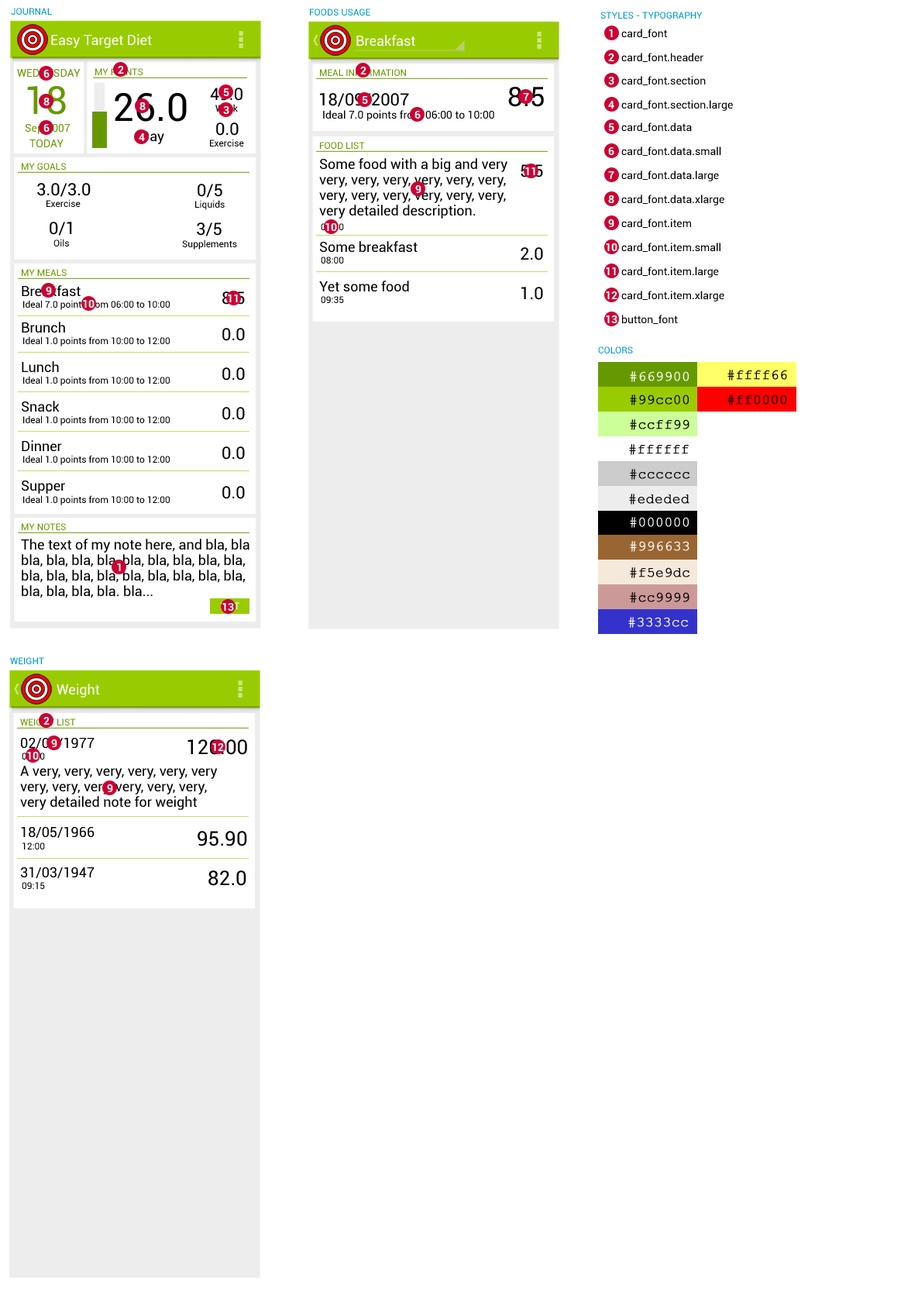
<style>
.page{position:relative;width:918px;height:1299px;background:#ffffff}
.page>*{position:absolute;margin:0}
.t1{font:9.3px "Roboto-Regular";color:#0099cc}
.t2{font:10.8px "Roboto-Bold";color:#ffffff}
.t3{font:10.8px "Roboto-Regular";color:#000000}
.t4{font:13.9px "Roboto-Regular";color:#ffffff}
.t5{font:10.8px "Roboto-Regular";color:#669900}
.t6{font:9.3px "Roboto-Regular";color:#669900}
.t7{font:38.7px "Roboto-Regular";color:#669900}
.t8{font:17px "Roboto-Regular";color:#000000}
.t9{font:27.1px "Roboto-Regular";color:#000000}
.t10{font:38.7px "Roboto-Regular";color:#000000}
.t11{font:9.3px "Roboto-Regular"}
.t12{font:13.9px "Roboto-Regular"}
.t13{font:9.3px "Roboto-Regular";color:#000000}
.t14{font:13.9px/15.5px "Roboto-Regular";color:#000000}
.t15{font:13.9px "Roboto-Regular";color:#000000}
.t16{font:17px "Roboto-Regular"}
.t17{font:13.9px "CourierNewPSMT";color:#fffefe;font-weight:bold}
.t18{font:13.9px "CourierNewPSMT";color:#000000;font-weight:bold}
.t19{font:13.9px "CourierNewPSMT";color:#ffffff;font-weight:bold}
.t20{font:20.1px "Roboto-Regular";color:#000000}
</style>
<div class="page">
<p class="t1" style="left:11px;top:8px;width:41px;height:7px">JOURNAL</p>
<p class="t1" style="left:310px;top:9px;width:60px;height:6px">FOODS USAGE</p>
<p class="t1" style="left:601px;top:12px;width:102px;height:7px">STYLES - TYPOGRAPHY</p>
<p class="t2" style="left:609px;top:29px;width:4px;height:8px">1</p>
<p class="t3" style="left:621px;top:29px;width:46px;height:9px">card_font</p>
<p class="t4" style="left:51px;top:34px;width:101px;height:14px">Easy Target Diet</p>
<p class="t4" style="left:356px;top:35px;width:59px;height:11px">Breakfast</p>
<p class="t2" style="left:608px;top:53px;width:6px;height:8px">2</p>
<p class="t3" style="left:621px;top:53px;width:83px;height:9px">card_font.header</p>
<p class="t2" style="left:118px;top:66px;width:6px;height:8px">2</p>
<p class="t5" style="left:17px;top:69px;width:64px;height:8px">WEDNESDAY</p>
<p class="t2" style="left:43px;top:70px;width:7px;height:7px">6</p>
<p class="t6" style="left:95px;top:68px;width:48px;height:7px">MY POINTS</p>
<p class="t6" style="left:320px;top:69px;width:86px;height:7px">MEAL INFORMATION</p>
<p class="t2" style="left:360px;top:67px;width:7px;height:7px">2</p>
<p class="t2" style="left:608px;top:77px;width:6px;height:7px">3</p>
<p class="t3" style="left:621px;top:76px;width:85px;height:9px">card_font.section</p>
<p class="t7" style="left:27px;top:86px;width:39px;height:29px">18</p>
<p class="t8" style="left:210px;top:88px;width:33px;height:13px">49.0</p>
<p class="t2" style="left:223px;top:88px;width:6px;height:8px">5</p>
<p class="t9" style="left:508px;top:87px;width:36px;height:20px">8.5</p>
<p class="t2" style="left:43px;top:98px;width:7px;height:7px">8</p>
<p class="t10" style="left:115px;top:93px;width:72px;height:29px">26.0</p>
<p class="t8" style="left:320px;top:93px;width:89px;height:14px">18/09/2007</p>
<p class="t2" style="left:362px;top:96px;width:6px;height:8px">5</p>
<p class="t2" style="left:523px;top:93px;width:6px;height:8px">7</p>
<p class="t2" style="left:608px;top:101px;width:6px;height:7px">4</p>
<p class="t3" style="left:621px;top:100px;width:112px;height:11px">card_font.section.large</p>
<p class="t2" style="left:139px;top:102px;width:7px;height:8px">8</p>
<p class="t11" style="left:215px;top:104px;width:23px;height:8px">Week</p>
<p class="t2" style="left:223px;top:106px;width:6px;height:8px">3</p>
<p class="t3" style="left:323px;top:110px;width:171px;height:11px">Ideal 7.0 points from 06:00 to 10:00</p>
<p class="t2" style="left:415px;top:111px;width:6px;height:8px">6</p>
<p class="t5" style="left:25px;top:124px;width:46px;height:10px">Sep 2007</p>
<p class="t2" style="left:43px;top:124px;width:7px;height:8px">6</p>
<p class="t8" style="left:216px;top:122px;width:23px;height:14px">0.0</p>
<p class="t2" style="left:608px;top:123px;width:6px;height:8px">5</p>
<p class="t3" style="left:621px;top:122px;width:71px;height:10px">card_font.data</p>
<p class="t2" style="left:139px;top:133px;width:6px;height:8px">4</p>
<p class="t12" style="left:141px;top:131px;width:23px;height:13px">Day</p>
<p class="t5" style="left:29px;top:139px;width:35px;height:8px">TODAY</p>
<p class="t13" style="left:210px;top:139px;width:34px;height:7px">Exercise</p>
<p class="t6" style="left:320px;top:142px;width:45px;height:7px">FOOD LIST</p>
<p class="t2" style="left:608px;top:147px;width:6px;height:8px">6</p>
<p class="t3" style="left:621px;top:146px;width:100px;height:10px">card_font.data.small</p>
<p class="t14" style="left:319px;top:158px;width:189px;height:61px">Some food with a big and very<br>very, very, very, very, very, very,<br>very, very, very, very, very, very,<br>very detailed description.</p>
<p class="t6" style="left:22px;top:163px;width:44px;height:7px">MY GOALS</p>
<p class="t8" style="left:521px;top:164px;width:22px;height:13px">5.5</p>
<p class="t2" style="left:525px;top:167px;width:10px;height:8px">11</p>
<p class="t2" style="left:608px;top:171px;width:6px;height:8px">7</p>
<p class="t3" style="left:621px;top:170px;width:98px;height:11px">card_font.data.large</p>
<p class="t8" style="left:37px;top:183px;width:54px;height:14px">3.0/3.0</p>
<p class="t8" style="left:198px;top:184px;width:24px;height:14px">0/5</p>
<p class="t2" style="left:415px;top:185px;width:7px;height:8px">9</p>
<p class="t2" style="left:608px;top:195px;width:6px;height:8px">8</p>
<p class="t3" style="left:621px;top:194px;width:103px;height:11px">card_font.data.xlarge</p>
<p class="t13" style="left:46px;top:199px;width:35px;height:8px">Exercise</p>
<p class="t13" style="left:195px;top:200px;width:30px;height:10px">Liquids</p>
<p class="t8" style="left:50px;top:222px;width:22px;height:14px">0/1</p>
<p class="t2" style="left:608px;top:219px;width:6px;height:8px">9</p>
<p class="t3" style="left:621px;top:219px;width:70px;height:9px">card_font.item</p>
<p class="t8" style="left:197px;top:222px;width:25px;height:14px">3/5</p>
<p class="t11" style="left:321px;top:223px;width:23px;height:7px">07:00</p>
<p class="t2" style="left:325px;top:223px;width:12px;height:8px">10</p>
<p class="t13" style="left:53px;top:239px;width:16px;height:7px">Oils</p>
<p class="t13" style="left:182px;top:239px;width:55px;height:11px">Supplements</p>
<p class="t15" style="left:320px;top:241px;width:98px;height:12px">Some breakfast</p>
<p class="t2" style="left:606px;top:243px;width:12px;height:8px">10</p>
<p class="t3" style="left:621px;top:243px;width:100px;height:9px">card_font.item.small</p>
<p class="t13" style="left:321px;top:256px;width:23px;height:7px">08:00</p>
<p class="t8" style="left:521px;top:247px;width:22px;height:13px">2.0</p>
<p class="t6" style="left:22px;top:269px;width:45px;height:7px">MY MEALS</p>
<p class="t2" style="left:606px;top:267px;width:10px;height:8px">11</p>
<p class="t3" style="left:621px;top:267px;width:98px;height:10px">card_font.item.large</p>
<p class="t15" style="left:319px;top:280px;width:90px;height:11px">Yet some food</p>
<p class="t15" style="left:22px;top:285px;width:59px;height:12px">Breakfast</p>
<p class="t2" style="left:46px;top:287px;width:6px;height:7px">9</p>
<p class="t16" style="left:222px;top:291px;width:23px;height:14px">8.5</p>
<p class="t8" style="left:521px;top:287px;width:22px;height:13px">1.0</p>
<p class="t2" style="left:606px;top:291px;width:12px;height:8px">12</p>
<p class="t3" style="left:621px;top:291px;width:103px;height:10px">card_font.item.xlarge</p>
<p class="t13" style="left:23px;top:300px;width:147px;height:10px">Ideal 7.0 points from 06:00 to 10:00</p>
<p class="t2" style="left:83px;top:300px;width:12px;height:8px">10</p>
<p class="t2" style="left:228px;top:294px;width:10px;height:8px">11</p>
<p class="t13" style="left:321px;top:296px;width:23px;height:7px">09:35</p>
<p class="t2" style="left:606px;top:315px;width:12px;height:8px">13</p>
<p class="t3" style="left:622px;top:315px;width:56px;height:9px">button_font</p>
<p class="t15" style="left:22px;top:322px;width:43px;height:11px">Brunch</p>
<p class="t8" style="left:222px;top:328px;width:23px;height:13px">0.0</p>
<p class="t13" style="left:23px;top:336px;width:147px;height:10px">Ideal 1.0 points from 10:00 to 12:00</p>
<p class="t1" style="left:598px;top:346px;width:35px;height:7px">COLORS</p>
<p class="t15" style="left:22px;top:361px;width:37px;height:12px">Lunch</p>
<p class="t13" style="left:23px;top:376px;width:147px;height:10px">Ideal 1.0 points from 10:00 to 12:00</p>
<p class="t8" style="left:222px;top:367px;width:23px;height:13px">0.0</p>
<p class="t17" style="left:630px;top:371px;width:59px;height:11px">#669900</p>
<p class="t18" style="left:728px;top:370px;width:59px;height:10px">#ffff66</p>
<p class="t15" style="left:22px;top:401px;width:38px;height:11px">Snack</p>
<p class="t18" style="left:630px;top:394px;width:59px;height:11px">#99cc00</p>
<p class="t18" style="left:728px;top:394px;width:58px;height:11px">#ff0000</p>
<p class="t8" style="left:222px;top:407px;width:23px;height:13px">0.0</p>
<p class="t13" style="left:23px;top:415px;width:147px;height:10px">Ideal 1.0 points from 10:00 to 12:00</p>
<p class="t18" style="left:630px;top:419px;width:60px;height:11px">#ccff99</p>
<p class="t15" style="left:22px;top:440px;width:40px;height:11px">Dinner</p>
<p class="t8" style="left:222px;top:446px;width:23px;height:13px">0.0</p>
<p class="t18" style="left:629px;top:444px;width:60px;height:11px">#ffffff</p>
<p class="t13" style="left:23px;top:455px;width:147px;height:10px">Ideal 1.0 points from 10:00 to 12:00</p>
<p class="t18" style="left:630px;top:469px;width:60px;height:11px">#cccccc</p>
<p class="t15" style="left:22px;top:480px;width:43px;height:14px">Supper</p>
<p class="t8" style="left:222px;top:486px;width:23px;height:13px">0.0</p>
<p class="t13" style="left:23px;top:495px;width:147px;height:10px">Ideal 1.0 points from 10:00 to 12:00</p>
<p class="t18" style="left:629px;top:494px;width:61px;height:10px">#ededed</p>
<p class="t17" style="left:630px;top:517px;width:59px;height:11px">#000000</p>
<p class="t11" style="left:22px;top:524px;width:44px;height:7px">MY NOTES</p>
<p class="t6" style="left:22px;top:523px;width:44px;height:7px">MY NOTES</p>
<p class="t14" style="left:21px;top:539px;width:229px;height:59px">The text of my note here, and bla, bla<br>bla, bla, bla, bla, bla, bla, bla, bla, bla,<br>bla, bla, bla, bla, bla, bla, bla, bla, bla,<br>bla, bla, bla, bla. bla...</p>
<p class="t17" style="left:630px;top:541px;width:60px;height:11px">#996633</p>
<p class="t2" style="left:117px;top:563px;width:4px;height:8px">1</p>
<p class="t18" style="left:630px;top:567px;width:60px;height:11px">#f5e9dc</p>
<p class="t18" style="left:630px;top:592px;width:60px;height:11px">#cc9999</p>
<p class="t11" style="left:221px;top:602px;width:18px;height:7px">EDIT</p>
<p class="t2" style="left:222px;top:603px;width:12px;height:8px">13</p>
<p class="t19" style="left:628px;top:617px;width:60px;height:11px">#3333cc</p>
<p class="t1" style="left:10px;top:657px;width:34px;height:7px">WEIGHT</p>
<p class="t4" style="left:57px;top:683px;width:43px;height:14px">Weight</p>
<p class="t6" style="left:20px;top:718px;width:56px;height:7px">WEIGHT LIST</p>
<p class="t2" style="left:43px;top:717px;width:7px;height:7px">2</p>
<p class="t15" style="left:21px;top:738px;width:74px;height:11px">02/03/1977</p>
<p class="t2" style="left:51px;top:739px;width:6px;height:8px">9</p>
<p class="t20" style="left:188px;top:739px;width:59px;height:16px">120.00</p>
<p class="t2" style="left:212px;top:743px;width:12px;height:8px">12</p>
<p class="t11" style="left:22px;top:752px;width:23px;height:7px">08:30</p>
<p class="t2" style="left:27px;top:752px;width:12px;height:7px">10</p>
<p class="t14" style="left:20px;top:766px;width:198px;height:44px">A very, very, very, very, very, very<br>very, very, very, very, very, very,<br>very detailed note for weight</p>
<p class="t2" style="left:107px;top:784px;width:6px;height:8px">9</p>
<p class="t15" style="left:21px;top:827px;width:74px;height:11px">18/05/1966</p>
<p class="t20" style="left:198px;top:831px;width:49px;height:15px">95.90</p>
<p class="t13" style="left:22px;top:842px;width:23px;height:7px">12:00</p>
<p class="t15" style="left:21px;top:867px;width:74px;height:11px">31/03/1947</p>
<p class="t13" style="left:22px;top:882px;width:23px;height:7px">09:15</p>
<p class="t20" style="left:208px;top:870px;width:38px;height:16px">82.0</p>
</div>
